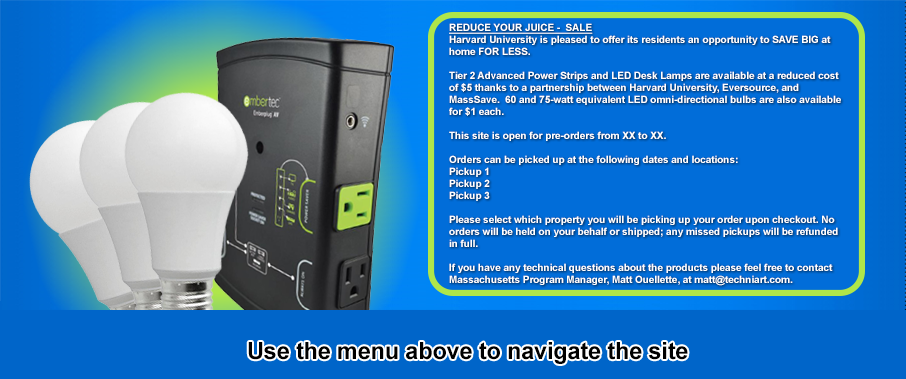
<style>
.page{position:relative;width:906px;height:379px;background:#016dd9}
.page>*{position:absolute;margin:0}
.t1{font:10px "Arial-BoldMT";letter-spacing:-0.005em;color:#ffffff}
.t2{font:10px "Arial-BoldMT";letter-spacing:-0.005em;color:#ffffff;text-decoration:underline}
.t3{font:23.4px "Arial-BoldMT";letter-spacing:-0.005em;color:#000000}
</style>
<div class="page">
<p class="t1" style="left:449px;top:23px;width:392px;height:263px"><span class="t2">REDUCE YOUR JUICE -  SALE<br></span>Harvard University is pleased to offer its residents an opportunity to SAVE BIG at home FOR LESS.<br><br>Tier 2 Advanced Power Strips and LED Desk Lamps are available at a reduced cost of $5 thanks to a partnership between Harvard University, Eversource, and MassSave.  60 and 75-watt equivalent LED omni-directional bulbs are also available for $1 each.<br><br>This site is open for pre-orders from XX to XX.<br><br>Orders can be picked up at the following dates and locations:<br>Pickup 1<br>Pickup 2<br>Pickup 3<br><br>Please select which property you will be picking up your order upon checkout. No orders will be held on your behalf or shipped; any missed pickups will be refunded in full. <br><br>If you have any technical questions about the products please feel free to contact <br>Massachusetts Program Manager, Matt Ouellette, at matt@techniart.com.</p>
<p class="t3" style="left:248px;top:342px;width:440px;height:22px">Use the menu above to navigate the site</p>
</div>
